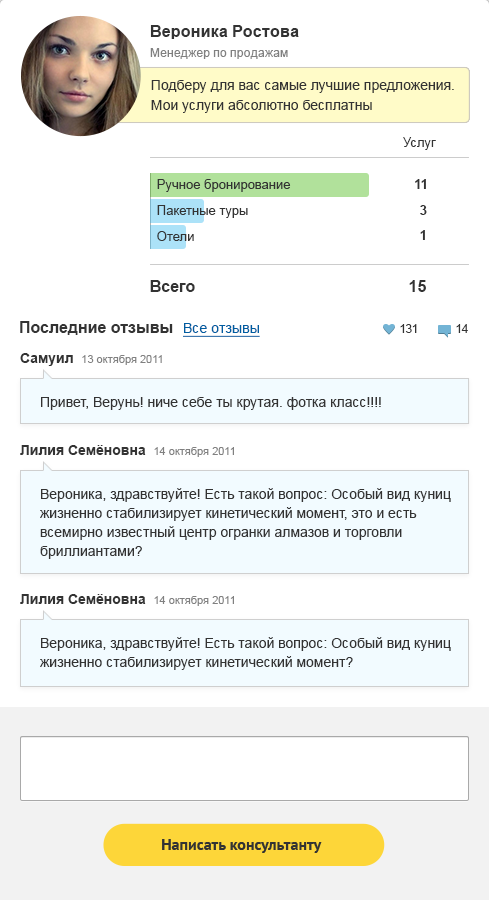
<style>
.page{position:relative;width:489px;height:900px;background:#ffffff}
.page>*{position:absolute;margin:0}
.t1{font:12px/20px "ArialMT";color:#808080}
.t2{font:16px/20px "Arial-BoldMT";color:#333333}
.t3{font:14px/20px "ArialMT";color:#333333}
.t4{font:13px "ArialMT";color:#333333}
.t5{font:13px/26px "ArialMT";color:#333333}
.t6{font:13px/26px "Arial-BoldMT";color:#333333}
.t7{font:13px "Arial-BoldMT";color:#333333}
.t8{font:16px "Arial-BoldMT";color:#333333}
.t9{font:14px "ArialMT";color:#005da1;text-decoration:underline}
.t10{font:12px "ArialMT";color:#333333}
.t11{font:14px/19px "ArialMT";color:#333333}
.t12{font:14px/19px "Arial-BoldMT";color:#333333}
.t13{font:11px/19px "ArialMT";color:#808080}
.t14{font:16px "PTSans-Bold";color:#333333}
</style>
<div class="page">
<p class="t1" style="left:150px;top:25px;width:149px;height:34px"><span class="t2">Вероника Ростова                   </span>Менеджер по продажам</p>
<p class="t3" style="left:151px;top:80px;width:303px;height:33px">Подберу для вас самые лучшие предложения.<br>Мои услуги абсолютно бесплатны</p>
<p class="t4" style="left:403px;top:137px;width:33px;height:13px">Услуг</p>
<p class="t5" style="left:157px;top:179px;width:134px;height:62px"><span class="t6"><br></span>Ручное бронирование<br>Пакетные туры<br>Отели</p>
<p class="t7" style="left:415px;top:179px;width:11px;height:10px">11</p>
<p class="t7" style="left:420px;top:205px;width:7px;height:10px">3</p>
<p class="t7" style="left:420px;top:230px;width:5px;height:10px">1</p>
<p class="t8" style="left:150px;top:280px;width:45px;height:12px">Всего</p>
<p class="t8" style="left:409px;top:280px;width:17px;height:12px">15</p>
<p class="t8" style="left:20px;top:321px;width:153px;height:14px">Последние отзывы</p>
<p class="t9" style="left:183px;top:323px;width:77px;height:14px">Все отзывы</p>
<p class="t10" style="left:400px;top:324px;width:17px;height:9px">131</p>
<p class="t10" style="left:456px;top:324px;width:12px;height:9px">14</p>
<p class="t11" style="left:20px;top:353px;width:361px;height:57px"><span class="t12">Самуил  </span><span class="t13">13 октября 2011<br></span>Привет, Верунь! ниче себе ты крутая. фотка класс!!!!</p>
<p class="t11" style="left:20px;top:445px;width:431px;height:114px"><span class="t12">Лилия Семёновна  </span><span class="t13">14 октября 2011<br></span>Вероника, здравствуйте! Есть такой вопрос: Особый вид куниц жизненно стабилизирует кинетический момент, это и есть всемирно известный центр огранки алмазов и торговли бриллиантами?</p>
<p class="t11" style="left:20px;top:594px;width:431px;height:76px"><span class="t12">Лилия Семёновна  </span><span class="t13">14 октября 2011<br></span>Вероника, здравствуйте! Есть такой вопрос: Особый вид куниц жизненно стабилизирует кинетический момент?</p>
<p class="t14" style="left:162px;top:839px;width:160px;height:14px">Написать консультанту</p>
</div>
